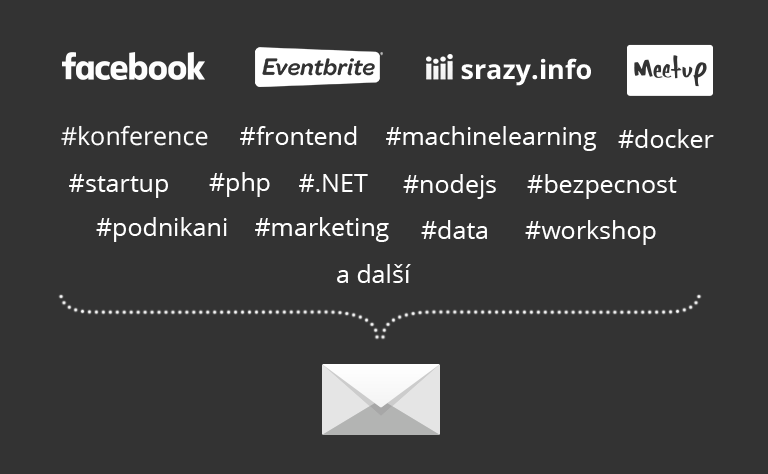
<style>
.page{position:relative;width:768px;height:474px;background:#333333}
.page>*{position:absolute;margin:0}
.t1{font:26.6px "OpenSans-Bold";color:#ffffff}
.t2{font:25px "OpenSans";color:#ffffff}
</style>
<div class="page">
<p class="t1" style="left:461px;top:58px;width:130px;height:28px">srazy.info</p>
<p class="t2" style="left:61px;top:125px;width:147px;height:21px">#konference</p>
<p class="t2" style="left:240px;top:126px;width:117px;height:19px">#frontend</p>
<p class="t2" style="left:386px;top:126px;width:211px;height:25px">#machinelearning</p>
<p class="t2" style="left:618px;top:129px;width:96px;height:19px">#docker</p>
<p class="t2" style="left:69px;top:174px;width:99px;height:24px">#startup</p>
<p class="t2" style="left:209px;top:172px;width:61px;height:25px">#php</p>
<p class="t2" style="left:299px;top:174px;width:69px;height:18px">#.NET</p>
<p class="t2" style="left:403px;top:174px;width:93px;height:25px">#nodejs</p>
<p class="t2" style="left:527px;top:174px;width:150px;height:25px">#bezpecnost</p>
<p class="t2" style="left:96px;top:217px;width:131px;height:25px">#podnikani</p>
<p class="t2" style="left:255px;top:217px;width:134px;height:25px">#marketing</p>
<p class="t2" style="left:421px;top:220px;width:66px;height:19px">#data</p>
<p class="t2" style="left:525px;top:220px;width:131px;height:25px">#workshop</p>
<p class="t2" style="left:337px;top:264px;width:74px;height:19px">a další</p>
</div>
